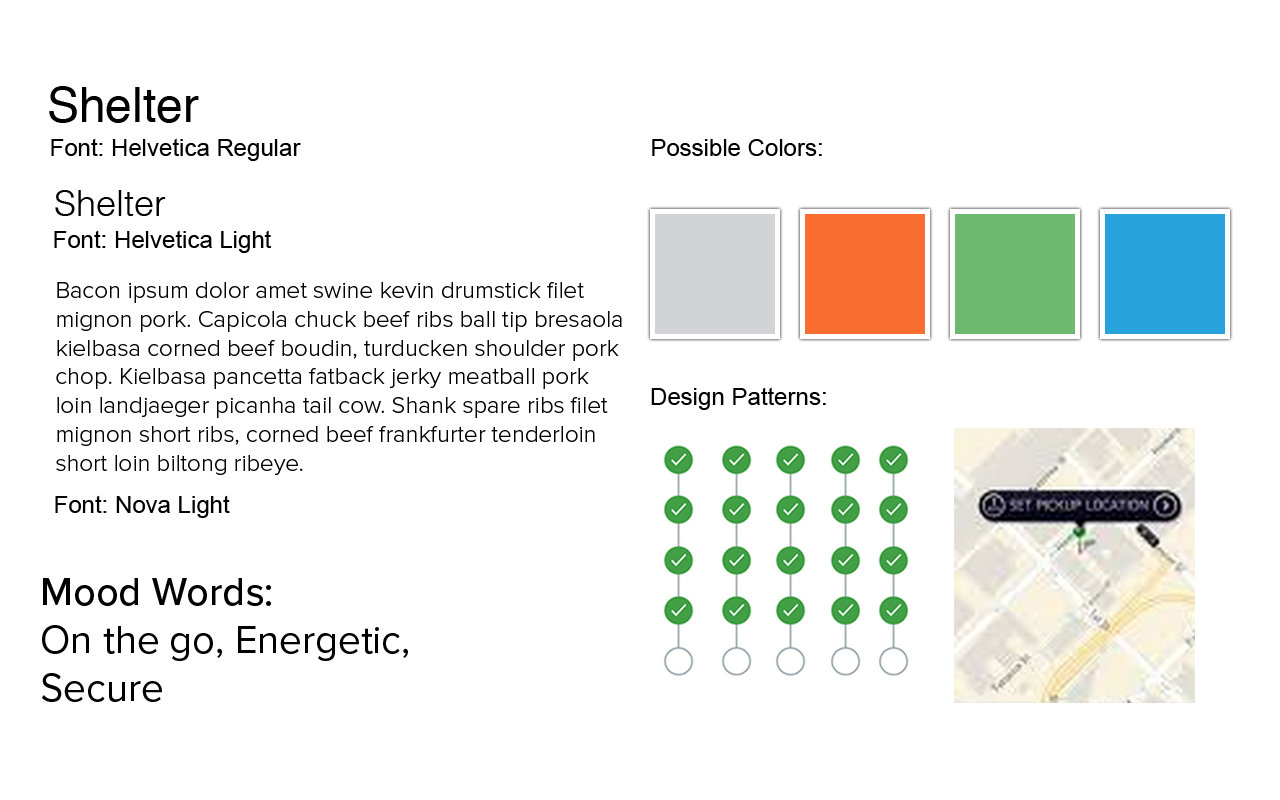
<style>
.page{position:relative;width:1280px;height:800px;background:#ffffff}
.page>*{position:absolute;margin:0}
.t1{font:48px "Helvetica";color:#000000}
.t2{font:24px "ArialMT";color:#000000}
.t3{font:36px "Helvetica-Light";color:#000000}
.t4{font:24px "ProximaNova-Light";color:#000000}
.t5{font:40px "ProximaNova-Regular";color:#000000}
.t6{font:40px "ProximaNova-Medium";color:#000000}
</style>
<div class="page">
<p class="t1" style="left:49px;top:86px;width:150px;height:37px">Shelter</p>
<p class="t2" style="left:51px;top:138px;width:250px;height:23px">Font: Helvetica Regular</p>
<p class="t2" style="left:652px;top:139px;width:170px;height:17px">Possible Colors:</p>
<p class="t3" style="left:55px;top:190px;width:111px;height:26px">Shelter</p>
<p class="t2" style="left:54px;top:230px;width:217px;height:23px">Font: Helvetica Light</p>
<p class="t4" style="left:56px;top:282px;width:566px;height:193px">Bacon ipsum dolor amet swine kevin drumstick filet mignon pork. Capicola chuck beef ribs ball tip bresaola kielbasa corned beef boudin, turducken shoulder pork chop. Kielbasa pancetta fatback jerky meatball pork loin landjaeger picanha tail cow. Shank spare ribs filet mignon short ribs, corned beef frankfurter tenderloin short loin biltong ribeye.</p>
<p class="t2" style="left:651px;top:387px;width:175px;height:23px">Design Patterns:</p>
<p class="t2" style="left:55px;top:495px;width:175px;height:23px">Font: Nova Light</p>
<p class="t5" style="left:42px;top:578px;width:366px;height:124px"><span class="t6">Mood Words:<br></span>On the go, Energetic,<br>Secure</p>
</div>
